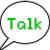
<style>
.page{position:relative;width:50px;height:50px;background:#ffffff}
.page>*{position:absolute;margin:0}
.t1{font:12.5px "Golden-Sun";color:#00c20e;font-weight:bold}
</style>
<div class="page">
<p class="t1" style="left:7px;top:18px;width:35px;height:12px">Talk</p>
</div>
